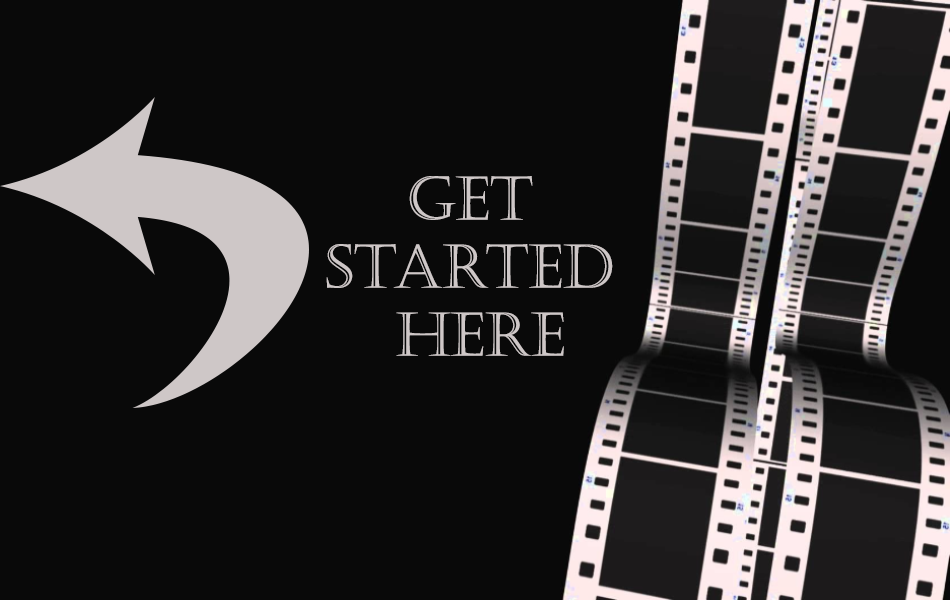
<style>
.page{position:relative;width:950px;height:600px;background:#090909}
.page>*{position:absolute;margin:0}
.t1{font:60px/68px "Castellar";color:#cec7c7}
</style>
<div class="page">
<p class="t1" style="left:326px;top:176px;width:287px;height:180px;text-align:center">GET <br>STARTED <br>HERE</p>
</div>
